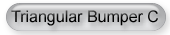
<style>
.page{position:relative;width:170px;height:35px}
.page>*{position:absolute;margin:0}
.t1{font:16px "ArialMT";color:#000000}
</style>
<div class="page">
<p class="t1" style="left:11px;top:10px;width:147px;height:16px">Triangular Bumper C</p>
</div>
